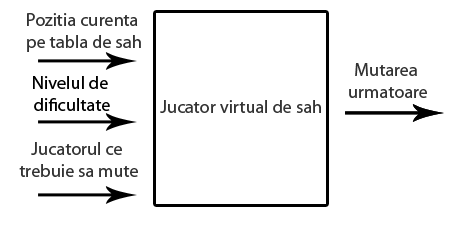
<style>
.page{position:relative;width:453px;height:226px;background:#ffffff}
.page>*{position:absolute;margin:0}
.t1{font:18.3px "MyriadPro-Regular";color:#333333}
.t2{font:18.3px "MyriadPro-Regular";color:#000000}
</style>
<div class="page">
<p class="t1" style="left:27px;top:13px;width:114px;height:39px;text-align:center">Pozitia curenta <br>pe tabla de sah</p>
<p class="t1" style="left:349px;top:63px;width:78px;height:35px;text-align:center">Mutarea <br>urmatoare</p>
<p class="t2" style="left:33px;top:76px;width:77px;height:35px;text-align:center">Nivelul de <br>dificultate</p>
<p class="t1" style="left:160px;top:100px;width:161px;height:13px">Jucator virtual de sah</p>
<p class="t1" style="left:19px;top:142px;width:119px;height:35px;text-align:center">Jucatorul ce <br>trebuie sa mute</p>
</div>
